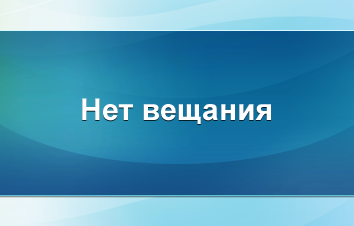
<style>
.page{position:relative;width:354px;height:226px}
.page>*{position:absolute;margin:0}
.t1{font:30px "Arial-BoldMT";color:#ffffff}
</style>
<div class="page">
<p class="t1" style="left:82px;top:98px;width:189px;height:26px">Нет вещания</p>
</div>
